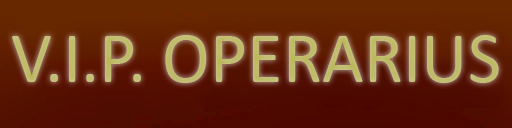
<style>
.page{position:relative;width:512px;height:128px}
.page>*{position:absolute;margin:0}
.t1{font:72.3px "Calibri";color:#c2bd6d}
</style>
<div class="page">
<p class="t1" style="left:12px;top:35px;width:487px;height:48px">V.I.P. OPERARIUS</p>
</div>
